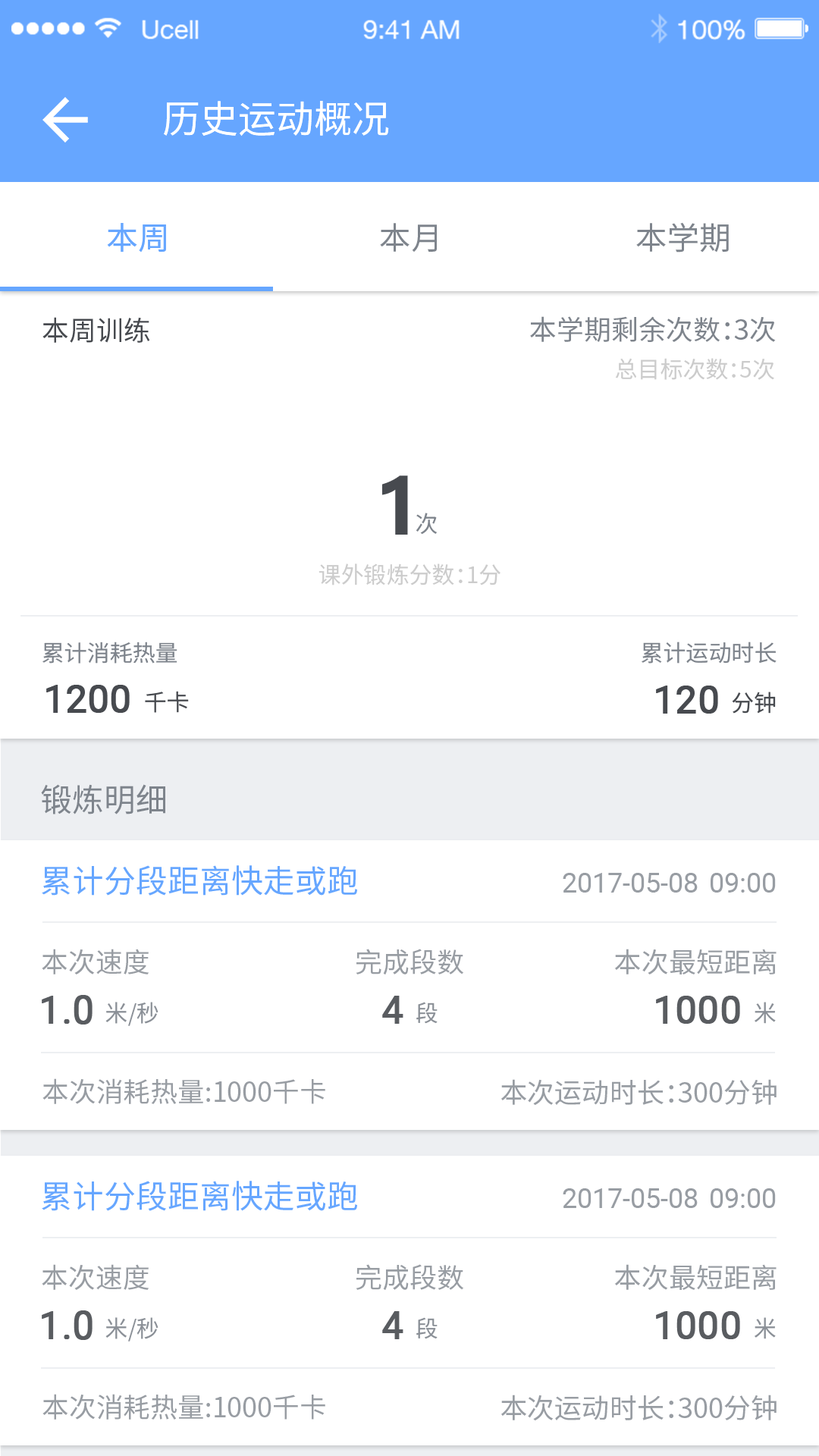
<style>
.page{position:relative;width:819px;height:1456px;background:#ffffff}
.page>*{position:absolute;margin:0}
.t1{font:37.9px "NotoSansHans-Regular";color:#ffffff}
.t2{font:31.8px "NotoSansHans-Regular";color:#66a6ff}
.t3{font:31.8px "NotoSansHans-Regular";color:#7e848c}
.t4{font:27.3px "NotoSansHans-Regular";color:#474a4f}
.t5{font:27.3px "NotoSansHans-Regular";color:#7e848c}
.t6{font:22.8px "NotoSansHans-Regular";color:#cccccc}
.t7{font:76.2px "MicrosoftYaHeiUI-Bold";color:#474a4f}
.t8{font:22.9px "NotoSansHans-Regular";color:#7e848c}
.t9{font:22.6px "NotoSansHans-Regular";color:#7e848c}
.t10{font:37.7px "Roboto-Regular";color:#474a4f;font-weight:bold}
.t11{font:38.1px "Roboto-Regular";color:#474a4f;font-weight:bold}
.t12{font:22.8px "NotoSansHans-Regular";color:#474a4f}
.t13{font:23px "NotoSansHans-Regular";color:#474a4f}
.t14{font:31.9px "NotoSansHans-Regular";color:#7e848c}
.t15{font:31.9px "NotoSansHans-Regular";color:#66a6ff}
.t16{font:27.3px "Roboto-Regular";color:#989da3}
.t17{font:27.3px "NotoSansHans-Regular";color:#989da3}
.t18{font:38.5px "Roboto-Regular";color:#474a4f;font-weight:bold}
.t19{font:23.2px "NotoSansHans-Regular";color:#7e848c}
.t20{font:23px "NotoSansHans-Regular";color:#7e848c}
.t21{font:37.9px "Roboto-Regular";color:#474a4f;font-weight:bold}
.t22{font:22.8px "NotoSansHans-Regular";color:#7e848c}
.t23{font:27.1px "NotoSansHans-Regular";color:#989da3}
.t24{font:27.5px "NotoSansHans-Regular";color:#989da3}
.t25{font:38.4px "Roboto-Regular";color:#474a4f;font-weight:bold}
</style>
<div class="page">
<p class="t1" style="left:164px;top:101px;width:225px;height:35px">历史运动概况</p>
<p class="t2" style="left:107px;top:223px;width:59px;height:30px">本周</p>
<p class="t3" style="left:380px;top:223px;width:57px;height:30px">本月</p>
<p class="t3" style="left:636px;top:222px;width:93px;height:31px">本学期</p>
<p class="t4" style="left:42px;top:317px;width:108px;height:26px">本周训练</p>
<p class="t5" style="left:530px;top:316px;width:246px;height:26px">本学期剩余次数：3次</p>
<p class="t6" style="left:615px;top:358px;width:159px;height:22px">总目标次数：5次</p>
<p class="t7" style="left:382px;top:475px;width:26px;height:60px">1</p>
<p class="t8" style="left:416px;top:513px;width:21px;height:22px">次</p>
<p class="t6" style="left:318px;top:563px;width:182px;height:22px">课外锻炼分数：1分</p>
<p class="t9" style="left:42px;top:642px;width:135px;height:22px">累计消耗热量</p>
<p class="t8" style="left:642px;top:642px;width:135px;height:22px">累计运动时长</p>
<p class="t10" style="left:46px;top:685px;width:84px;height:28px">1200</p>
<p class="t11" style="left:656px;top:686px;width:62px;height:28px">120</p>
<p class="t12" style="left:145px;top:691px;width:44px;height:22px">千卡</p>
<p class="t13" style="left:732px;top:692px;width:44px;height:22px">分钟</p>
<p class="t14" style="left:41px;top:784px;width:124px;height:30px">锻炼明细</p>
<p class="t15" style="left:42px;top:865px;width:315px;height:31px">累计分段距离快走或跑</p>
<p class="t16" style="left:563px;top:873px;width:213px;height:20px">2017-05-08  09:00</p>
<p class="t17" style="left:42px;top:949px;width:107px;height:25px">本次速度</p>
<p class="t17" style="left:356px;top:949px;width:107px;height:26px">完成段数</p>
<p class="t17" style="left:614px;top:949px;width:163px;height:25px">本次最短距离</p>
<p class="t18" style="left:42px;top:995px;width:51px;height:29px;opacity:0.9">1.0</p>
<p class="t19" style="left:105px;top:1002px;width:53px;height:24px;opacity:0.9">米/秒</p>
<p class="t11" style="left:382px;top:996px;width:21px;height:28px;opacity:0.9">4</p>
<p class="t20" style="left:416px;top:1002px;width:22px;height:22px;opacity:0.9">段</p>
<p class="t21" style="left:656px;top:996px;width:84px;height:28px;opacity:0.9">1000</p>
<p class="t22" style="left:755px;top:1002px;width:21px;height:22px;opacity:0.9">米</p>
<p class="t23" style="left:42px;top:1078px;width:283px;height:26px">本次消耗热量:1000千卡</p>
<p class="t24" style="left:500px;top:1079px;width:277px;height:27px">本次运动时长：300分钟</p>
<p class="t15" style="left:42px;top:1181px;width:315px;height:30px">累计分段距离快走或跑</p>
<p class="t16" style="left:563px;top:1188px;width:213px;height:20px">2017-05-08  09:00</p>
<p class="t17" style="left:42px;top:1264px;width:107px;height:26px">本次速度</p>
<p class="t17" style="left:356px;top:1264px;width:107px;height:27px">完成段数</p>
<p class="t17" style="left:614px;top:1264px;width:163px;height:26px">本次最短距离</p>
<p class="t25" style="left:42px;top:1310px;width:51px;height:30px;opacity:0.9">1.0</p>
<p class="t11" style="left:382px;top:1311px;width:21px;height:28px;opacity:0.9">4</p>
<p class="t21" style="left:656px;top:1311px;width:84px;height:28px;opacity:0.9">1000</p>
<p class="t19" style="left:105px;top:1317px;width:53px;height:24px;opacity:0.9">米/秒</p>
<p class="t20" style="left:416px;top:1317px;width:22px;height:22px;opacity:0.9">段</p>
<p class="t22" style="left:755px;top:1317px;width:21px;height:22px;opacity:0.9">米</p>
<p class="t23" style="left:42px;top:1394px;width:283px;height:26px">本次消耗热量:1000千卡</p>
<p class="t24" style="left:500px;top:1395px;width:277px;height:26px">本次运动时长：300分钟</p>
</div>
